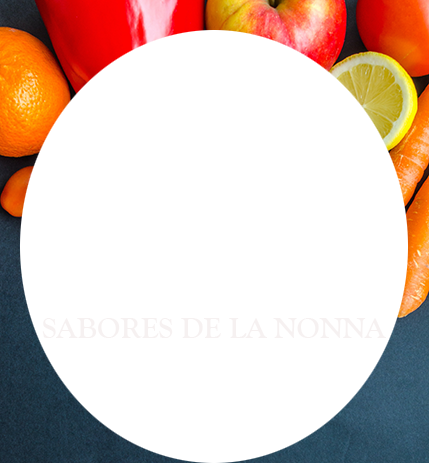
<style>
.page{position:relative;width:429px;height:463px;background:#ffffff}
.page>*{position:absolute;margin:0}
.t1{font:30px "GoudyOldStyleT-Bold";color:#f6f1f1}
</style>
<div class="page">
<p class="t1" style="left:42px;top:318px;width:344px;height:20px">SABORES DE LA NONNA</p>
</div>
